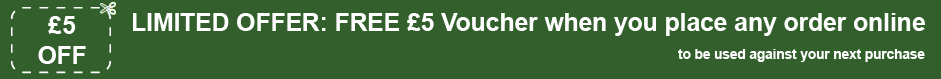
<style>
.page{position:relative;width:941px;height:79px;background:#325f2b}
.page>*{position:absolute;margin:0}
.t1{font:24.7px "Arial-BoldMT";color:#ffffff}
.t2{font:24.6px "Arial-BoldMT";color:#ffffff}
.t3{font:13.5px "Arial-BoldMT";color:#ffffff}
</style>
<div class="page">
<p class="t1" style="left:38px;top:16px;width:48px;height:48px;text-align:center">£5<br>OFF</p>
<p class="t2" style="left:133px;top:13px;width:792px;height:23px">LIMITED OFFER: FREE £5 Voucher when you place any order online</p>
<p class="t3" style="left:678px;top:49px;width:247px;height:13px">to be used against your next purchase</p>
</div>
